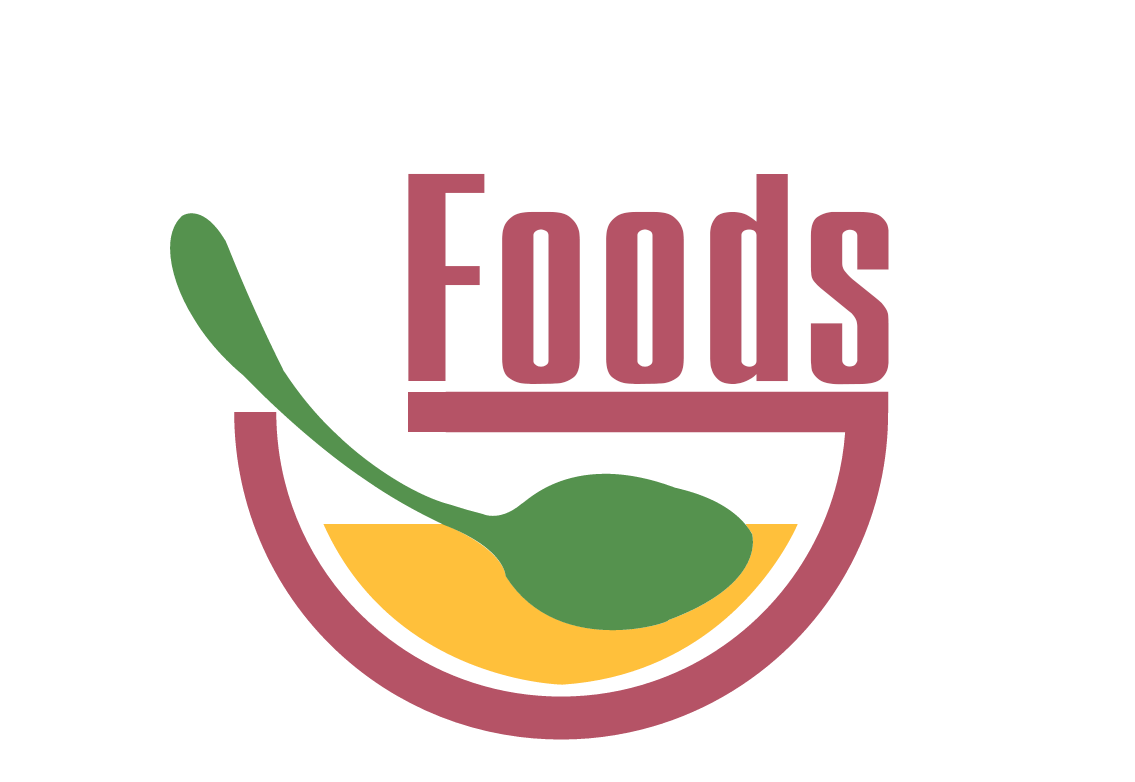
<style>
.page{position:relative;width:1135px;height:782px;background:#ffffff}
.page>*{position:absolute;margin:0}
.t1{font:246.6px "GremiNormal";color:#b55366;scale:1.27 1}
</style>
<div class="page">
<p class="t1" style="left:408px;top:173px;width:481px;height:212px">Foods</p>
</div>
